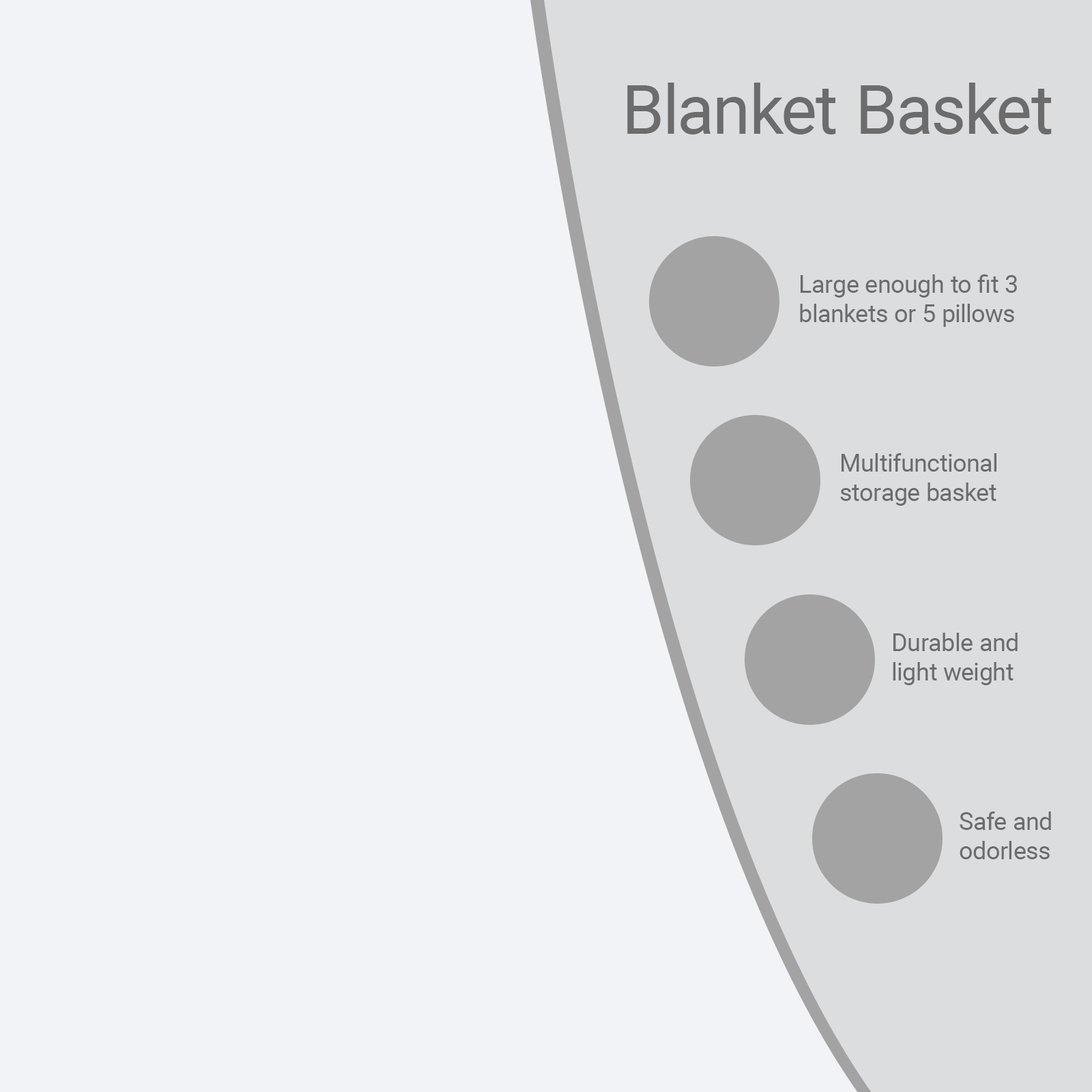
<style>
.page{position:relative;width:1092px;height:1092px;background:#f2f3f6}
.page>*{position:absolute;margin:0}
.t1{font:68.2px "Roboto-Regular";color:#6c6c6c}
.t2{font:24.6px "Roboto-Regular";color:#6c6c6c}
</style>
<div class="page">
<p class="t1" style="left:627px;top:83px;width:425px;height:51px">Blanket Basket</p>
<p class="t2" style="left:800px;top:274px;width:217px;height:53px">Large enough to fit 3 <br>blankets or 5 pillows</p>
<p class="t2" style="left:840px;top:453px;width:156px;height:53px">Multifunctional<br>storage basket</p>
<p class="t2" style="left:893px;top:633px;width:125px;height:52px">Durable and<br>light weight</p>
<p class="t2" style="left:960px;top:811px;width:91px;height:48px">Safe and<br>odorless</p>
</div>
